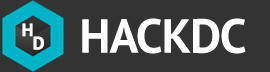
<style>
.page{position:relative;width:270px;height:72px;background:#333333}
.page>*{position:absolute;margin:0}
.t1{font:18px "PTSans-Bold";letter-spacing:-0.05em;color:#ffffff;font-weight:bold}
.t2{font:48px "PTSans-Bold";letter-spacing:-0.025em;color:#ffffff}
</style>
<div class="page">
<p class="t1" style="left:22px;top:23px;width:11px;height:14px">H</p>
<p class="t2" style="left:82px;top:18px;width:164px;height:36px">HACKDC</p>
<p class="t1" style="left:33px;top:36px;width:11px;height:14px">D</p>
</div>
